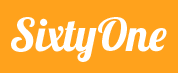
<style>
.page{position:relative;width:178px;height:73px;background:#ffa21c}
.page>*{position:absolute;margin:0}
.t1{font:45.1px "Lobster1.4";color:#ffffff}
</style>
<div class="page">
<p class="t1" style="left:11px;top:17px;width:156px;height:45px">SixtyOne</p>
</div>
